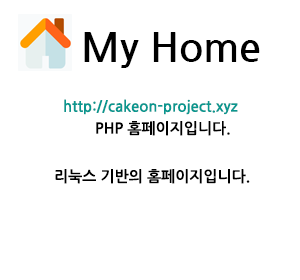
<style>
.page{position:relative;width:300px;height:280px;background:#ffffff}
.page>*{position:absolute;margin:0}
.t1{font:40px "NanumGothicBold";color:#000000}
.t2{font:15px "NanumGothicBold";color:#0a978f}
.t3{font:15px "NanumGothicBold";color:#000000}
</style>
<div class="page">
<p class="t1" style="left:84px;top:32px;width:176px;height:36px">My Home</p>
<p class="t2" style="left:64px;top:99px;width:174px;height:16px">http://cakeon-project.xyz</p>
<p class="t3" style="left:96px;top:121px;width:134px;height:15px">PHP 홈페이지입니다.</p>
<p class="t3" style="left:55px;top:169px;width:195px;height:15px">리눅스 기반의 홈페이지입니다.</p>
</div>
